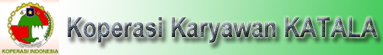
<style>
.page{position:relative;width:383px;height:55px}
.page>*{position:absolute;margin:0}
.t1{font:27.8px "ArialNarrow-Bold"}
</style>
<div class="page">
<p class="t1" style="left:67px;top:17px;width:311px;height:26px">Koperasi Karyawan KATALA</p>
</div>
